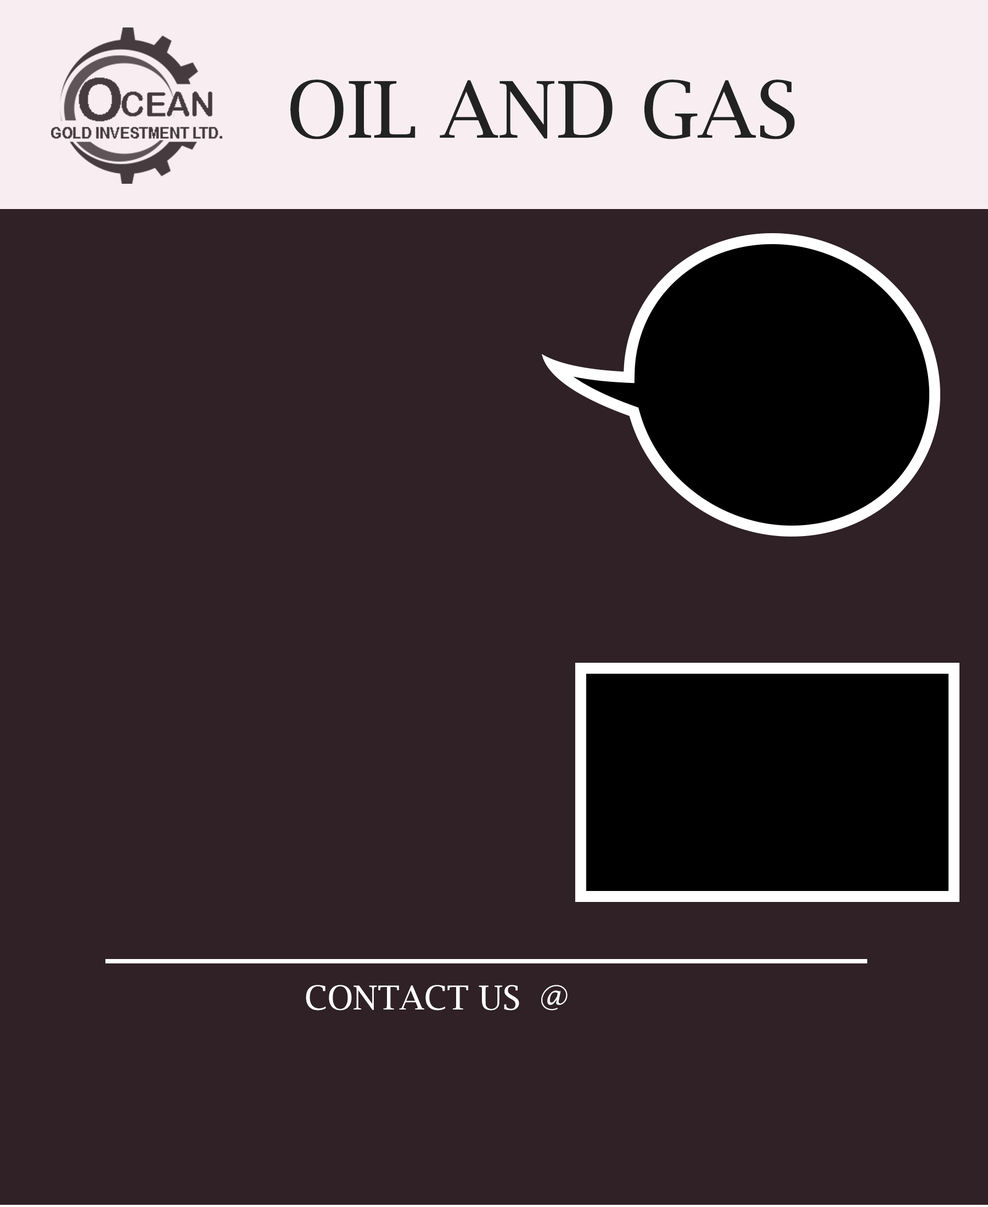
<style>
.page{position:relative;width:988px;height:1207px;background:#2f2126}
.page>*{position:absolute;margin:0}
.t1{font:78.3px "LucidaBright";color:#222222}
.t2{font:32.9px "LucidaBright";color:#fefefe}
</style>
<div class="page">
<p class="t1" style="left:290px;top:80px;width:505px;height:59px">OIL AND GAS</p>
<p class="t2" style="left:306px;top:985px;width:213px;height:26px">CONTACT US</p>
<p class="t2" style="left:541px;top:985px;width:26px;height:26px">@</p>
</div>
